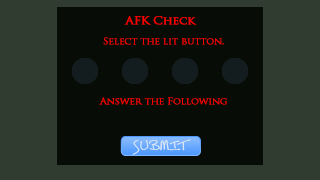
<style>
.page{position:relative;width:320px;height:180px;background:#070c07}
.page>*{position:absolute;margin:0}
.t1{font:10.8px "TrajanPro-Regular";letter-spacing:-0.04em;color:#ff0000;font-weight:bold;scale:1.11 1}
.t2{font:9px "TrajanPro-Regular";letter-spacing:-0.04em;color:#ff0000;font-weight:bold;scale:1.11 1}
</style>
<div class="page">
<p class="t1" style="left:124px;top:16px;width:73px;height:9px">AFK Check</p>
<p class="t2" style="left:103px;top:37px;width:121px;height:8px">Select the lit button.</p>
<p class="t2" style="left:99px;top:97px;width:128px;height:8px">Answer the Following</p>
</div>
